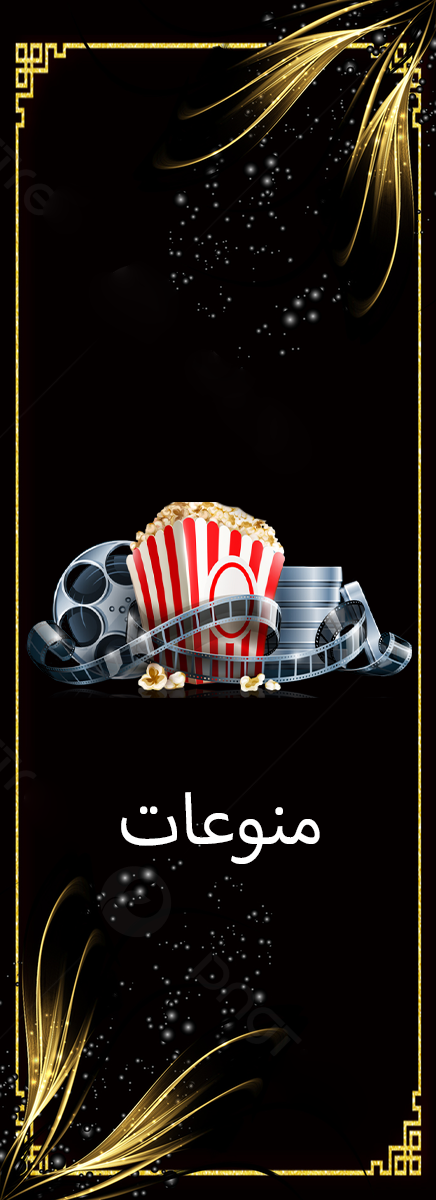
<style>
.page{position:relative;width:436px;height:1200px;background:#040000}
.page>*{position:absolute;margin:0}
.t1{font:100px "MyriadArabic-Regular";color:#ffffff}
</style>
<div class="page">
<p class="t1" style="left:121px;top:792px;width:199px;height:72px">منوعات</p>
</div>
